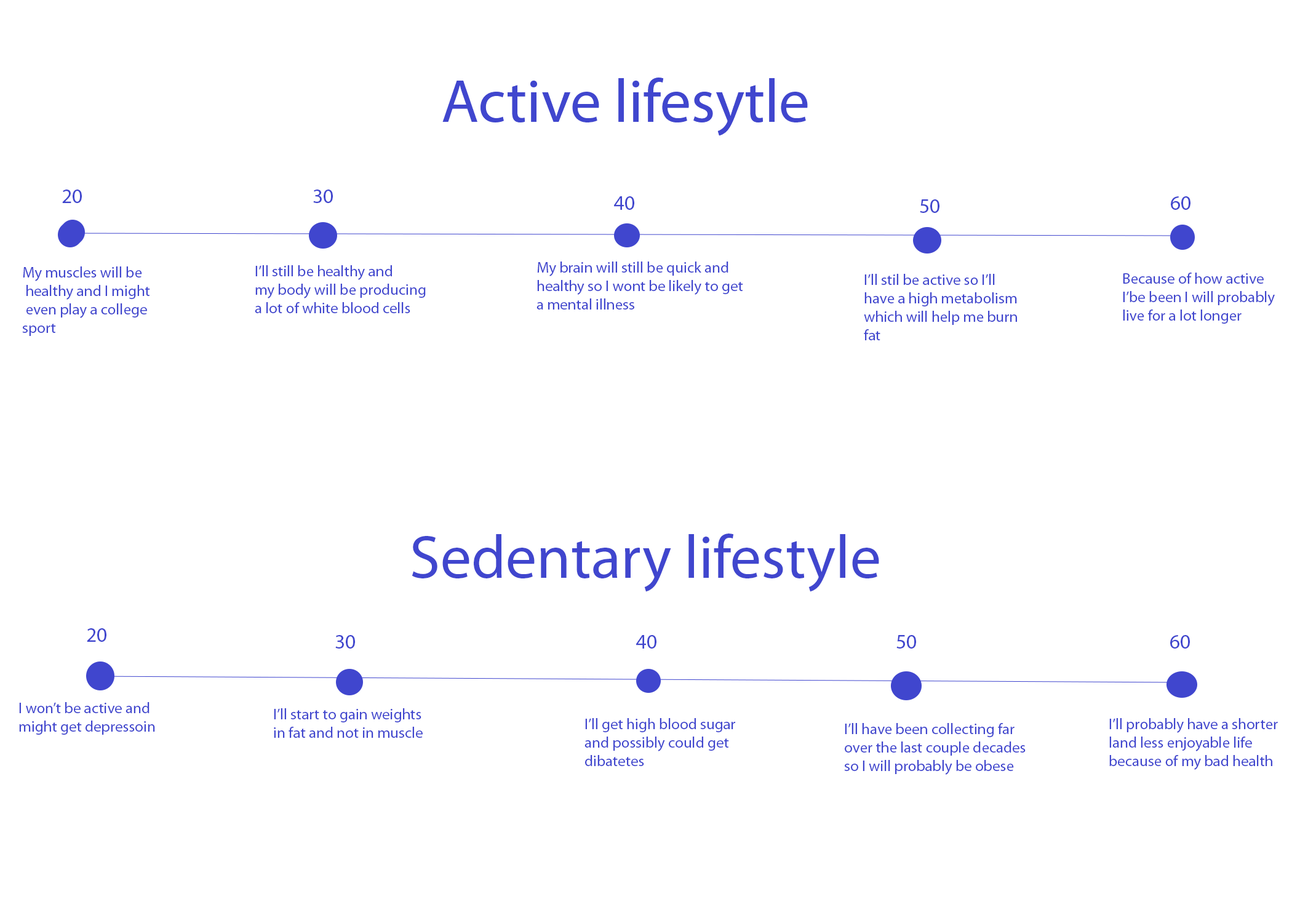
<style>
.page{position:relative;width:1292px;height:923px;background:#ffffff}
.page>*{position:absolute;margin:0}
.t1{font:61.5px "MyriadPro-Regular";color:#4046ce}
.t2{font:20.5px "MyriadPro-Regular";color:#4046ce}
.t3{font:15.4px "MyriadPro-Regular";color:#4046ce}
</style>
<div class="page">
<p class="t1" style="left:442px;top:78px;width:366px;height:58px">Active lifesytle</p>
<p class="t2" style="left:62px;top:190px;width:20px;height:13px">20</p>
<p class="t2" style="left:313px;top:190px;width:20px;height:13px">30</p>
<p class="t2" style="left:614px;top:196px;width:20px;height:14px">40</p>
<p class="t2" style="left:1171px;top:196px;width:20px;height:14px">60</p>
<p class="t2" style="left:920px;top:199px;width:20px;height:14px">50</p>
<p class="t3" style="left:22px;top:266px;width:128px;height:70px">My muscles will be<br> healthy and I might<br> even play a college<br>sport</p>
<p class="t3" style="left:255px;top:265px;width:171px;height:48px">I’ll still be healthy and<br>my body will be producing<br>a lot of white blood cells</p>
<p class="t3" style="left:537px;top:261px;width:206px;height:48px">My brain will still be quick and<br>healthy so I wont be likely to get<br>a mental illness</p>
<p class="t3" style="left:864px;top:274px;width:153px;height:66px">I’ll stil be active so I’ll<br>have a high metabolism<br>which will help me burn <br>fat</p>
<p class="t3" style="left:1123px;top:273px;width:152px;height:51px">Because of how active<br>I’be been I will probably<br>live for a lot longer</p>
<p class="t1" style="left:412px;top:533px;width:467px;height:59px">Sedentary lifestyle</p>
<p class="t2" style="left:87px;top:628px;width:19px;height:14px">20</p>
<p class="t2" style="left:335px;top:635px;width:20px;height:13px">30</p>
<p class="t2" style="left:636px;top:635px;width:20px;height:13px">40</p>
<p class="t2" style="left:896px;top:635px;width:20px;height:13px">50</p>
<p class="t2" style="left:1170px;top:635px;width:20px;height:13px">60</p>
<p class="t3" style="left:19px;top:702px;width:136px;height:33px">I won’t be active and<br>might get depressoin</p>
<p class="t3" style="left:274px;top:708px;width:149px;height:30px">I’ll start to gain weights<br>in fat and not in muscle</p>
<p class="t3" style="left:585px;top:718px;width:150px;height:48px">I’ll get high blood sugar<br>and possibly could get<br>dibatetes</p>
<p class="t3" style="left:844px;top:723px;width:182px;height:52px">I’ll have been collecting far<br>over the last couple decades<br>so I will probably be obese</p>
<p class="t3" style="left:1109px;top:718px;width:169px;height:52px">I’ll probably have a shorter<br>land less enjoyable life<br>because of my bad health</p>
</div>
